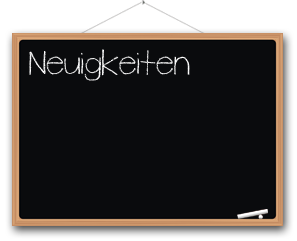
<style>
.page{position:relative;width:297px;height:241px;background:#0a0b0d}
.page>*{position:absolute;margin:0}
.t1{font:40px "Rudiment";color:#ffffff}
</style>
<div class="page">
<p class="t1" style="left:29px;top:49px;width:161px;height:32px">Neuigkeiten</p>
</div>
